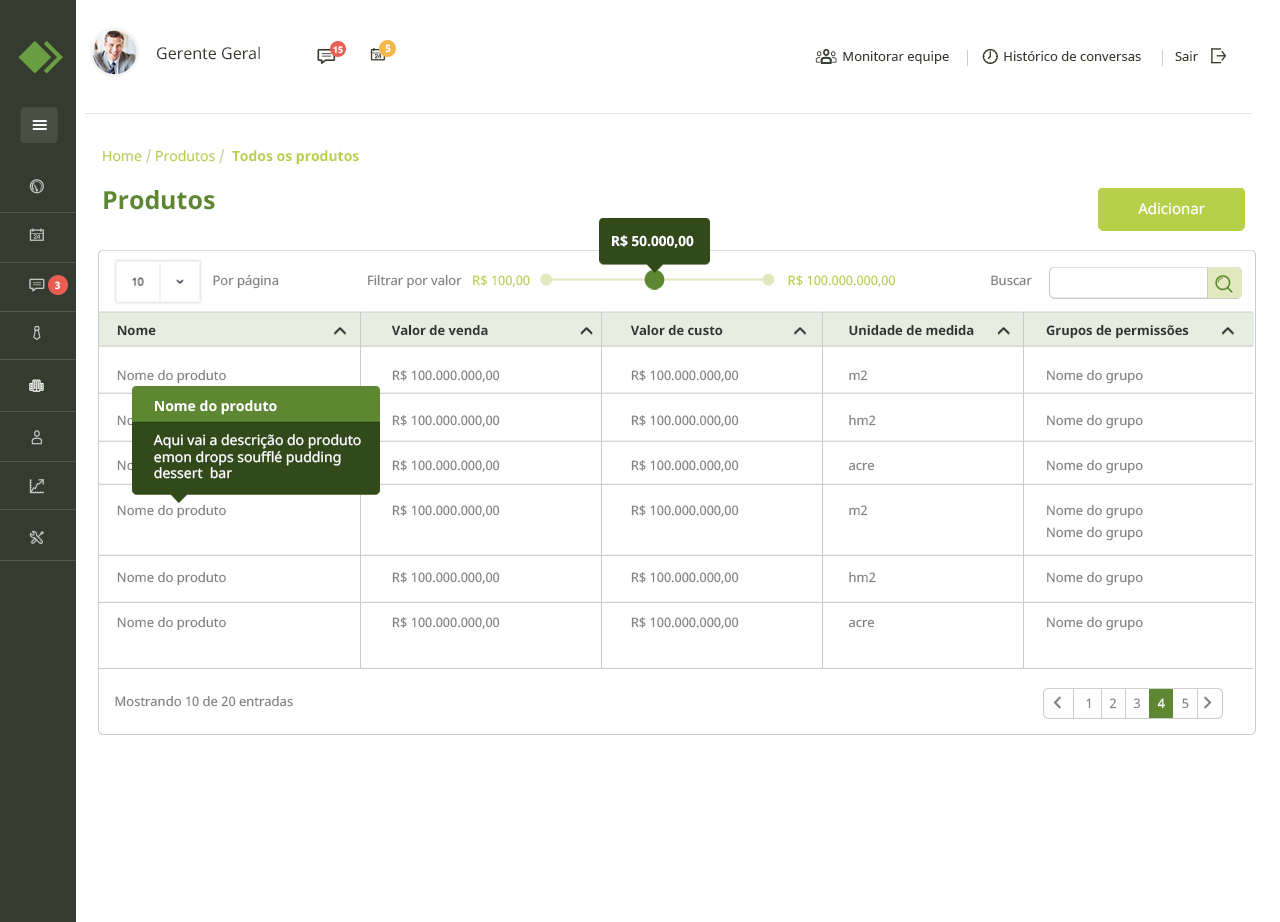
<style>
.page{position:relative;width:1280px;height:922px;background:#ffffff}
.page>*{position:absolute;margin:0}
.t1{font:16px "NotoSans";color:#353b2f}
.t2{font:9px "NotoSans-Bold";color:#ffffff}
.t3{font:10px "NotoSans-Bold";color:#ffffff}
.t4{font:13px "NotoSans";color:#353b2f}
.t5{font:14px "NotoSans-Bold";color:#b8cf49}
.t6{font:14px "NotoSans";color:#b8cf49}
.t7{font:14px "NotoSans";color:#c7cfa1}
.t8{font:25px "NotoSans-Bold";color:#5d8730}
.t9{font:15px "NotoSans";color:#ffffff}
.t10{font:14px "NotoSans-Bold";color:#ffffff}
.t11{font:13px "NotoSans";color:#808080}
.t12{font:13px "NotoSans";color:#b8cf49}
.t13{font:13px/45px "NotoSans";color:#808080}
.t14{font:13px/45px "NotoSans-Bold";color:#333333}
.t15{font:13px/22px "NotoSans";color:#808080}
.t16{font:14px "NotoSans";color:#ffffff}
</style>
<div class="page">
<p class="t1" style="left:157px;top:46px;width:103px;height:14px">Gerente Geral</p>
<p class="t2" style="left:333px;top:46px;width:10px;height:8px">15</p>
<p class="t3" style="left:385px;top:44px;width:6px;height:9px">5</p>
<p class="t4" style="left:843px;top:51px;width:355px;height:13px">Monitorar equipe                Histórico de conversas          Sair</p>
<p class="t5" style="left:103px;top:149px;width:256px;height:16px"><span class="t6">Home </span><span class="t7">/</span><span class="t6"> Produtos </span><span class="t7">/  </span>Todos os produtos</p>
<p class="t8" style="left:104px;top:190px;width:111px;height:20px">Produtos</p>
<p class="t9" style="left:1138px;top:202px;width:67px;height:13px">Adicionar</p>
<p class="t10" style="left:612px;top:235px;width:82px;height:13px">R$ 50.000,00</p>
<p class="t3" style="left:55px;top:281px;width:5px;height:9px">3</p>
<p class="t11" style="left:213px;top:274px;width:66px;height:15px">Por página</p>
<p class="t11" style="left:368px;top:274px;width:94px;height:15px">Filtrar por valor</p>
<p class="t12" style="left:473px;top:275px;width:57px;height:12px">R$ 100,00</p>
<p class="t12" style="left:788px;top:275px;width:107px;height:12px">R$ 100.000.000,00</p>
<p class="t11" style="left:991px;top:275px;width:41px;height:11px">Buscar</p>
<p class="t13" style="left:391px;top:324px;width:109px;height:305px"><span class="t14">Valor de venda<br></span>R$ 100.000.000,00<br>R$ 100.000.000,00<br>R$ 100.000.000,00<br>R$ 100.000.000,00<br><br>R$ 100.000.000,00<br>R$ 100.000.000,00<br>R$ 100.000.000,00</p>
<p class="t13" style="left:630px;top:324px;width:109px;height:305px"><span class="t14">Valor de custo<br></span>R$ 100.000.000,00<br>R$ 100.000.000,00<br>R$ 100.000.000,00<br>R$ 100.000.000,00<br><br>R$ 100.000.000,00<br>R$ 100.000.000,00<br>R$ 100.000.000,00</p>
<p class="t13" style="left:848px;top:324px;width:126px;height:304px"><span class="t14">Unidade de medida<br></span>m2<br>hm2<br>acre<br>m2<br><br>hm2<br>acre<br>m2</p>
<p class="t13" style="left:1046px;top:324px;width:143px;height:307px"><span class="t14">Grupos de permissões<br></span>Nome do grupo<br>Nome do grupo<br>Nome do grupo<br>Nome do grupo<br><span class="t15">Nome do grupo<br></span>Nome do grupo<br>Nome do grupo<br>Nome do grupo</p>
<p class="t16" style="left:153px;top:400px;width:208px;height:79px"><span class="t10">Nome do produto<br><br></span>Aqui vai a descrição do produto emon drops soufflé pudding dessert  bar</p>
<p class="t11" style="left:115px;top:695px;width:178px;height:12px">Mostrando 10 de 20 entradas</p>
</div>
